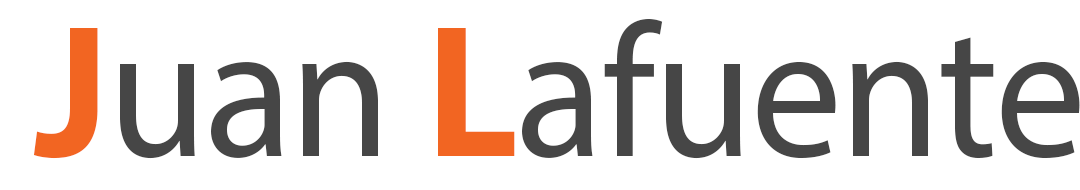
<style>
.page{position:relative;width:1080px;height:190px;background:#ffffff}
.page>*{position:absolute;margin:0}
.t1{font:190.1px "MyriadPro-Regular";letter-spacing:-0.01em;color:#464646;scale:0.95 1}
.t2{font:190.1px "MyriadPro-Bold";letter-spacing:-0.01em;color:#f26522;scale:0.95 1}
</style>
<div class="page">
<p class="t1" style="left:33px;top:19px;width:1047px;height:140px"><span class="t2">J</span>uan <span class="t2">L</span>afuente</p>
</div>
